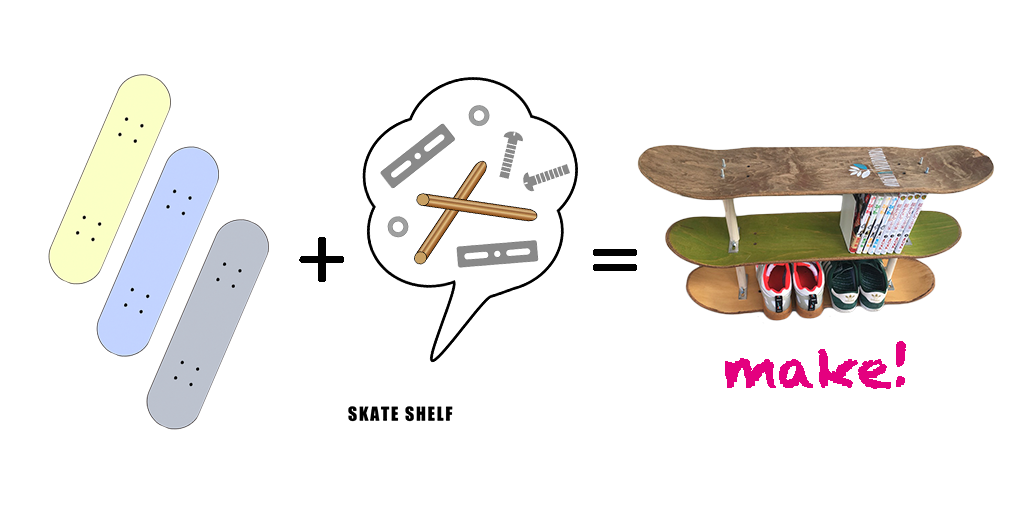
<style>
.page{position:relative;width:1024px;height:518px;background:#ffffff}
.page>*{position:absolute;margin:0}
.t1{font:74.8px "HiraMaruProN-W4";color:#000000;font-weight:bold}
.t2{font:52.5px "Chalkduster";color:#e4007f;font-weight:bold}
</style>
<div class="page">
<p class="t1" style="left:299px;top:237px;width:45px;height:45px">+</p>
<p class="t1" style="left:593px;top:249px;width:44px;height:22px">=</p>
<p class="t2" style="left:725px;top:341px;width:181px;height:48px">make!</p>
</div>
